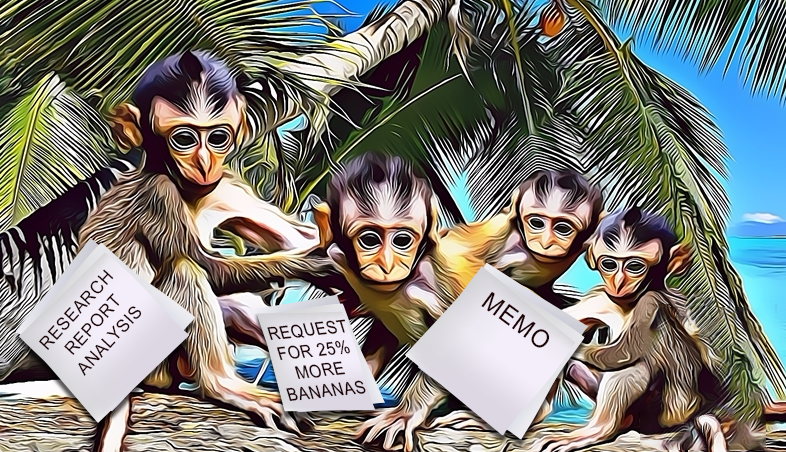
<style>
.page{position:relative;width:786px;height:452px}
.page>*{position:absolute;margin:0}
.t1{font:17.5px/22.5px "ArialMT";letter-spacing:0.04em;color:#1f0405;text-transform:uppercase}
.t2{font:24.7px "ArialMT";letter-spacing:0.04em;color:#1f0405;text-transform:uppercase}
.t3{font:18px/21.3px "ArialMT";letter-spacing:0.04em;color:#1f0405;text-transform:uppercase;scale:0.87 1}
</style>
<div class="page">
<p class="t1" style="left:38px;top:269px;width:104px;height:107px;text-align:center;rotate:-48deg">research<br>report<br>analysis</p>
<p class="t2" style="left:481px;top:291px;width:69px;height:57px;rotate:36deg">Memo</p>
<p class="t3" style="left:267px;top:319px;width:99px;height:82px;text-align:center;rotate:-6deg">request<br>for 25%<br>more<br>bananas</p>
</div>
